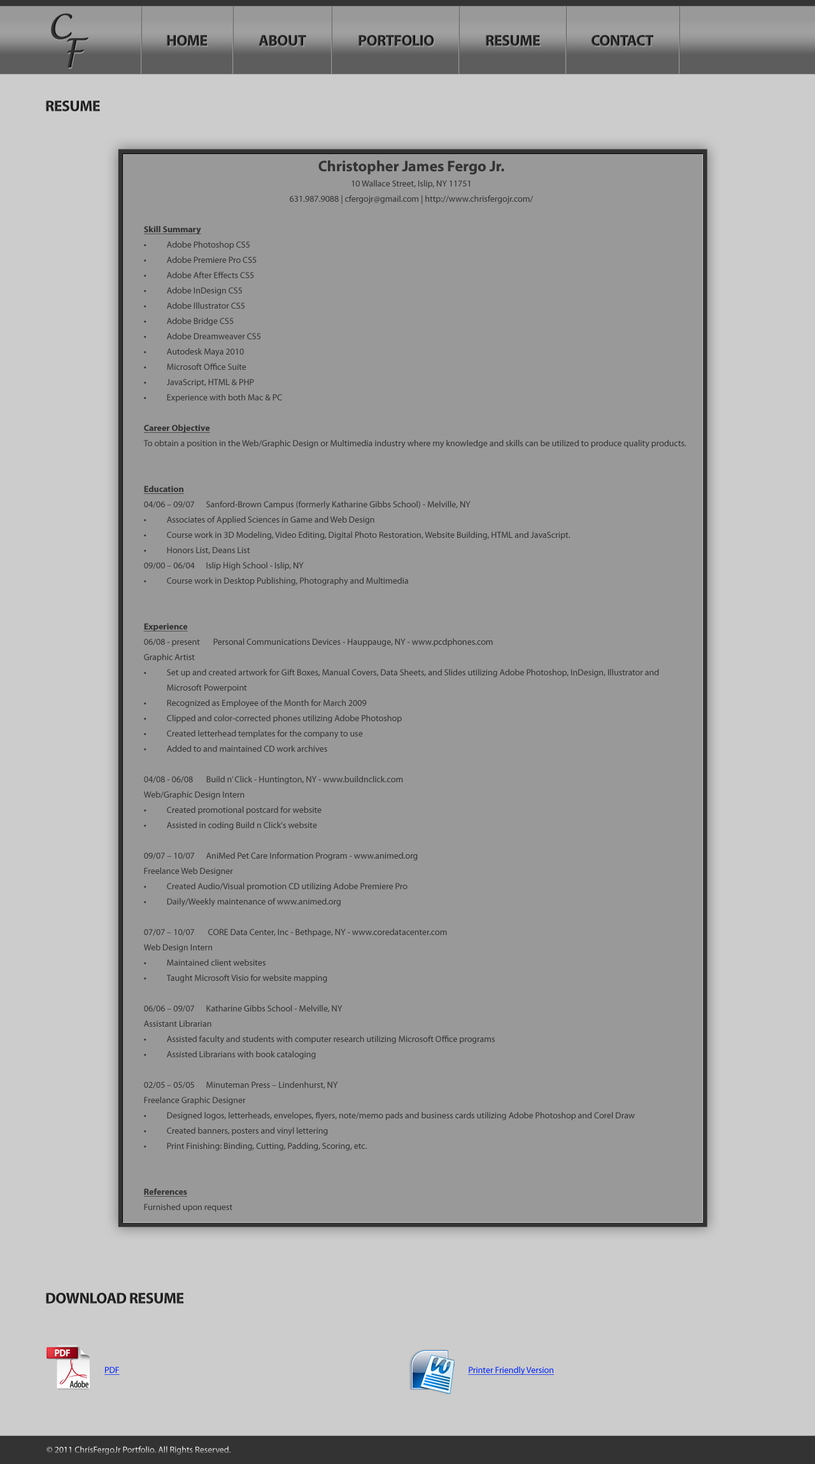
<style>
.page{position:relative;width:815px;height:1464px;background:#999999}
.page>*{position:absolute;margin:0}
.t1{font:15.3px "MyriadPro-Bold";letter-spacing:-0.025em;color:#262626}
.t2{font:15.3px "MyriadPro-Bold";letter-spacing:-0.025em;color:#272727}
.t3{font:8.9px/15.3px "MyriadPro-Regular";color:#333333}
.t4{font:15.3px/15.3px "MyriadPro-Bold";color:#333333}
.t5{font:8.9px/15.3px "MyriadPro-Bold";color:#333333;text-decoration:underline}
.t6{font:8.9px "MyriadPro-Regular";color:#0024ff;text-decoration:underline}
.t7{font:8.9px "MyriadPro-Regular"}
</style>
<div class="page">
<p class="t1" style="left:167px;top:35px;width:40px;height:11px">HOME</p>
<p class="t1" style="left:258px;top:35px;width:48px;height:11px">ABOUT</p>
<p class="t2" style="left:358px;top:35px;width:75px;height:11px">PORTFOLIO</p>
<p class="t2" style="left:486px;top:35px;width:54px;height:11px">RESUME</p>
<p class="t1" style="left:591px;top:35px;width:62px;height:11px">CONTACT</p>
<p class="t2" style="left:46px;top:101px;width:54px;height:10px">RESUME</p>
<p class="t3" style="left:143px;top:160px;width:543px;height:1052px;text-align:center"><span class="t4">Christopher James Fergo Jr.<br></span>10 Wallace Street, Islip, NY 11751<br>631.987.9088 | cfergojr@gmail.com | http://www.chrisfergojr.com/<br><br><span class="t5">Skill Summary<br></span>• Adobe Photoshop CS5<br>• Adobe Premiere Pro CS5<br>• Adobe After Effects CS5<br>• Adobe InDesign CS5<br>• Adobe Illustrator CS5<br>• Adobe Bridge CS5<br>• Adobe Dreamweaver CS5<br>• Autodesk Maya 2010<br>• Microsoft Office Suite<br>• JavaScript, HTML &amp; PHP<br>• Experience with both Mac &amp; PC<br><br><span class="t5">Career Objective<br></span>To obtain a position in the Web/Graphic Design or Multimedia industry where my knowledge and skills can be utilized to produce quality products.<br><br><br><span class="t5">Education<br></span>04/06 – 09/07      Sanford-Brown Campus (formerly Katharine Gibbs School) - Melville, NY<br>• Associates of Applied Sciences in Game and Web Design<br>• Course work in 3D Modeling, Video Editing, Digital Photo Restoration, Website Building, HTML and JavaScript.<br>• Honors List, Deans List<br>09/00 – 06/04      Islip High School - Islip, NY<br>• Course work in Desktop Publishing, Photography and Multimedia<br><br><br><span class="t5">Experience<br></span>06/08 - present       Personal Communications Devices - Hauppauge, NY - www.pcdphones.com<br>Graphic Artist<br>• Set up and created artwork for Gift Boxes, Manual Covers, Data Sheets, and Slides utilizing Adobe Photoshop, InDesign, Illustrator and <br> Microsoft Powerpoint<br>• Recognized as Employee of the Month for March 2009<br>• Clipped and color-corrected phones utilizing Adobe Photoshop<br>• Created letterhead templates for the company to use<br>• Added to and maintained CD work archives<br><br>04/08 - 06/08       Build n’ Click - Huntington, NY - www.buildnclick.com<br>Web/Graphic Design Intern<br>• Created promotional postcard for website<br>• Assisted in coding Build n Click's website<br><br>09/07 – 10/07      AniMed Pet Care Information Program - www.animed.org<br>Freelance Web Designer<br>• Created Audio/Visual promotion CD utilizing Adobe Premiere Pro<br>• Daily/Weekly maintenance of www.animed.org<br><br>07/07 – 10/07       CORE Data Center, Inc - Bethpage, NY - www.coredatacenter.com<br>Web Design Intern<br>• Maintained client websites<br>• Taught Microsoft Visio for website mapping<br><br>06/06 – 09/07      Katharine Gibbs School - Melville, NY      <br>Assistant Librarian <br>• Assisted faculty and students with computer research utilizing Microsoft Office programs<br>• Assisted Librarians with book cataloging<br><br>02/05 – 05/05      Minuteman Press – Lindenhurst, NY<br>Freelance Graphic Designer<br>• Designed logos, letterheads, envelopes, flyers, note/memo pads and business cards utilizing Adobe Photoshop and Corel Draw<br>• Created banners, posters and vinyl lettering<br>• Print Finishing: Binding, Cutting, Padding, Scoring, etc.<br><br><br><span class="t5">References<br></span>Furnished upon request</p>
<p class="t1" style="left:46px;top:1293px;width:137px;height:10px">DOWNLOAD RESUME</p>
<p class="t6" style="left:104px;top:1366px;width:450px;height:9px">PDF                                                           Printer Friendly Version</p>
<p class="t7" style="left:46px;top:1446px;width:184px;height:8px">© 2011 ChrisFergoJr Portfolio. All Rights Reserved.</p>
</div>
